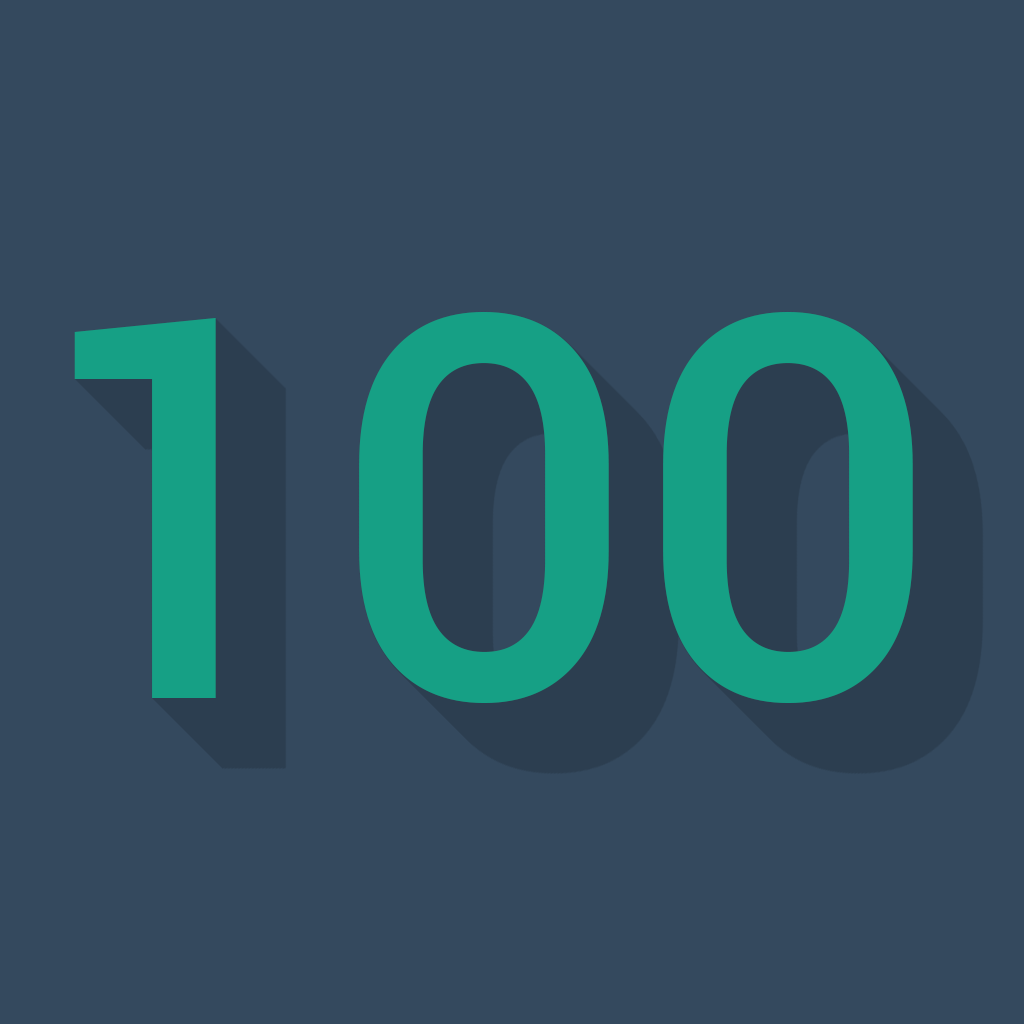
<style>
.page{position:relative;width:1024px;height:1024px;background:#34495e}
.page>*{position:absolute;margin:0}
.t1{font:534.7px "Roboto-Medium";color:#16a085}
</style>
<div class="page">
<p class="t1" style="left:74px;top:311px;width:839px;height:392px">100</p>
</div>
